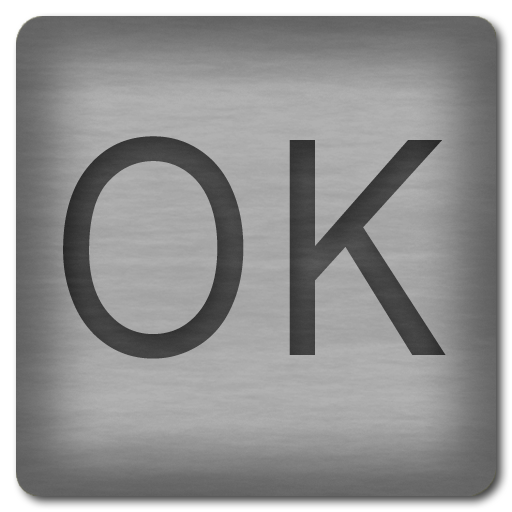
<style>
.page{position:relative;width:512px;height:512px}
.page>*{position:absolute;margin:0}
.t1{font:299.7px "ArialMT";letter-spacing:0.06em;color:#414141;scale:0.88 1}
</style>
<div class="page">
<p class="t1" style="left:63px;top:136px;width:383px;height:223px">OK</p>
</div>
